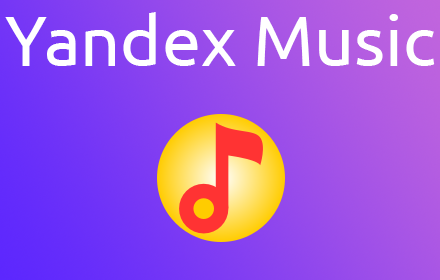
<style>
.page{position:relative;width:440px;height:280px}
.page>*{position:absolute;margin:0}
.t1{font:70px "Ubuntu";color:#ffffff}
</style>
<div class="page">
<p class="t1" style="left:5px;top:12px;width:430px;height:54px">Yandex Music</p>
</div>
